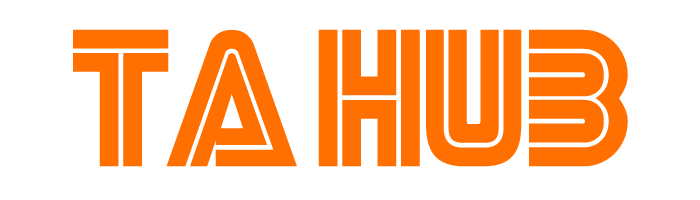
<style>
.page{position:relative;width:700px;height:200px;background:#ffffff}
.page>*{position:absolute;margin:0}
.t1{font:138.9px "SEGA";color:#ff7001}
</style>
<div class="page">
<p class="t1" style="left:73px;top:29px;width:555px;height:138px">TA Hub</p>
</div>
